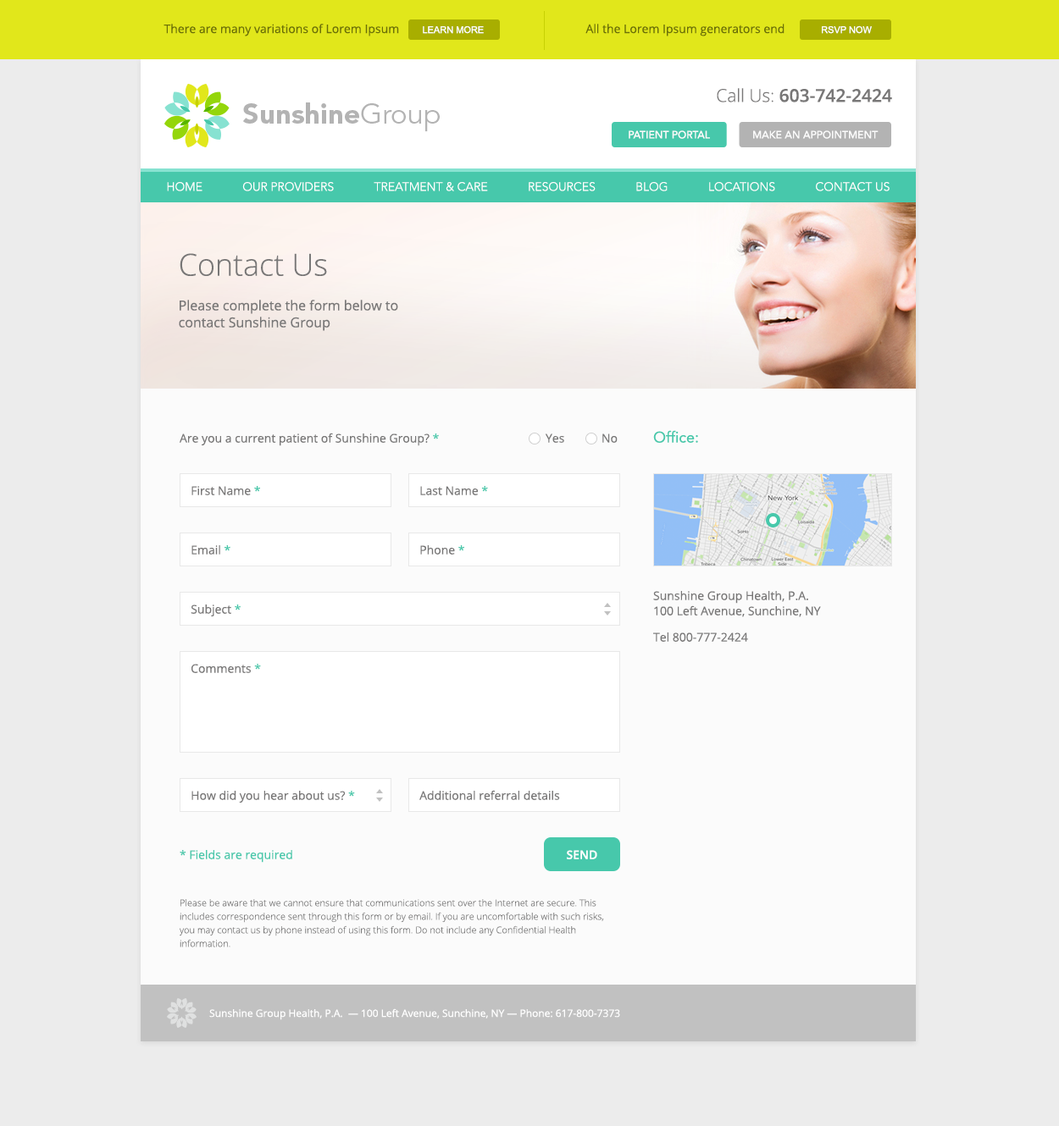
<style>
.page{position:relative;width:1059px;height:1126px;background:#ececec}
.page>*{position:absolute;margin:0}
.t1{font:11.9px "OpenSans";color:#6b7007}
.t2{font:9.3px "ArialMT";color:#fefefe;text-transform:uppercase}
.t3{font:17.8px "OpenSans-Semibold";color:#787777}
.t4{font:17.8px "OpenSans-Light";color:#787777}
.t5{font:10.5px "Avenir-Medium";color:#fbfbfb}
.t6{font:11.9px "Avenir-Light";color:#ffffff;text-transform:uppercase}
.t7{font:30.4px "OpenSans-Light";color:#787777}
.t8{font:13.6px/16.9px "OpenSans";color:#787777}
.t9{font:11.9px "OpenSans";color:#787777}
.t10{font:11.9px "OpenSans";color:#47c8ab}
.t11{font:11.9px/15.2px "OpenSans";color:#787777}
.t12{font:15.2px/15.2px "Avenir-Roman";color:#47c8ab}
.t13{font:11.9px/26.3px "OpenSans";color:#787777}
.t14{font:11.9px "OpenSans-Semibold";color:#ffffff}
.t15{font:9.3px/13.6px "OpenSans-Light";color:#787777}
.t16{font:10.2px "OpenSans";color:#ffffff}
</style>
<div class="page">
<p class="t1" style="left:163px;top:24px;width:321px;height:12px">There are many variations of Lorem Ipsum       <span class="t2">Learn More</span></p>
<p class="t1" style="left:585px;top:24px;width:286px;height:12px">All the Lorem Ipsum generators end           <span class="t2">RSVP NOW</span></p>
<p class="t3" style="left:716px;top:88px;width:176px;height:14px"><span class="t4">Call Us: </span>603-742-2424</p>
<p class="t5" style="left:628px;top:130px;width:82px;height:9px">PATIENT PORTAL</p>
<p class="t5" style="left:753px;top:130px;width:125px;height:9px">MAKE AN APPOINTMENT</p>
<p class="t6" style="left:167px;top:182px;width:722px;height:9px">Home             Our Providers             Treatment &amp; Care             Resources             Blog             Locations             Contact Us</p>
<p class="t7" style="left:180px;top:253px;width:147px;height:23px">Contact Us</p>
<p class="t8" style="left:179px;top:300px;width:219px;height:31px">Please complete the form below to<br>contact Sunshine Group</p>
<p class="t9" style="left:180px;top:433px;width:259px;height:13px">Are you a current patient of Sunshine Group? <span class="t10">*</span></p>
<p class="t9" style="left:545px;top:434px;width:72px;height:9px">Yes            No</p>
<p class="t11" style="left:653px;top:430px;width:168px;height:212px"><span class="t12">Office:<br><br><br><br><br><br><br><br></span>Sunshine Group Health, P.A. <br>100 Left Avenue, Sunchine, NY<br><span class="t13">Tel 800-777-2424</span></p>
<p class="t9" style="left:191px;top:486px;width:69px;height:9px">First Name <span class="t10">*</span></p>
<p class="t9" style="left:420px;top:486px;width:68px;height:9px">Last Name <span class="t10">*</span></p>
<p class="t9" style="left:191px;top:545px;width:39px;height:10px">Email <span class="t10">*</span></p>
<p class="t9" style="left:420px;top:545px;width:44px;height:10px">Phone <span class="t10">*</span></p>
<p class="t9" style="left:191px;top:605px;width:50px;height:12px">Subject <span class="t10">*</span></p>
<p class="t9" style="left:191px;top:664px;width:70px;height:9px">Comments <span class="t10">*</span></p>
<p class="t9" style="left:191px;top:791px;width:164px;height:13px">How did you hear about us? <span class="t10">*</span></p>
<p class="t9" style="left:419px;top:790px;width:141px;height:10px">Additional referral details</p>
<p class="t10" style="left:180px;top:850px;width:112px;height:13px">* Fields are required</p>
<p class="t14" style="left:567px;top:850px;width:30px;height:10px">SEND</p>
<p class="t15" style="left:180px;top:899px;width:424px;height:49px">Please be aware that we cannot ensure that communications sent over the Internet are secure. This includes correspondence sent through this form or by email. If you are uncomfortable with such risks, you may contact us by phone instead of using this form. Do not include any Confidential Health information.</p>
<p class="t16" style="left:209px;top:1009px;width:411px;height:12px">Sunshine Group Health, P.A.  — 100 Left Avenue, Sunchine, NY — Phone: 617-800-7373</p>
</div>
